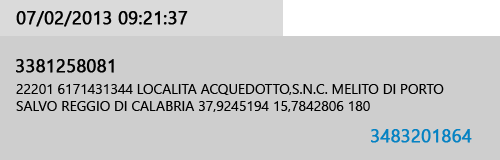
<style>
.page{position:relative;width:500px;height:160px;background:#cecece}
.page>*{position:absolute;margin:0}
.t1{font:18px "SegoeUI";color:#000000;font-weight:bold}
.t2{font:18px "SegoeUI";color:#010101;font-weight:bold}
.t3{font:14px "SegoeUI";color:#000000}
.t4{font:18px "SegoeUI";color:#0582c3;font-weight:bold}
</style>
<div class="page">
<p class="t1" style="left:16px;top:11px;width:172px;height:16px">07/02/2013 09:21:37</p>
<p class="t2" style="left:16px;top:59px;width:98px;height:14px">3381258081</p>
<p class="t3" style="left:16px;top:84px;width:428px;height:28px">22201 6171431344 LOCALITA ACQUEDOTTO,S.N.C. MELITO DI PORTO SALVO REGGIO DI CALABRIA 37,9245194 15,7842806 180</p>
<p class="t4" style="left:371px;top:129px;width:101px;height:14px">3483201864</p>
</div>
